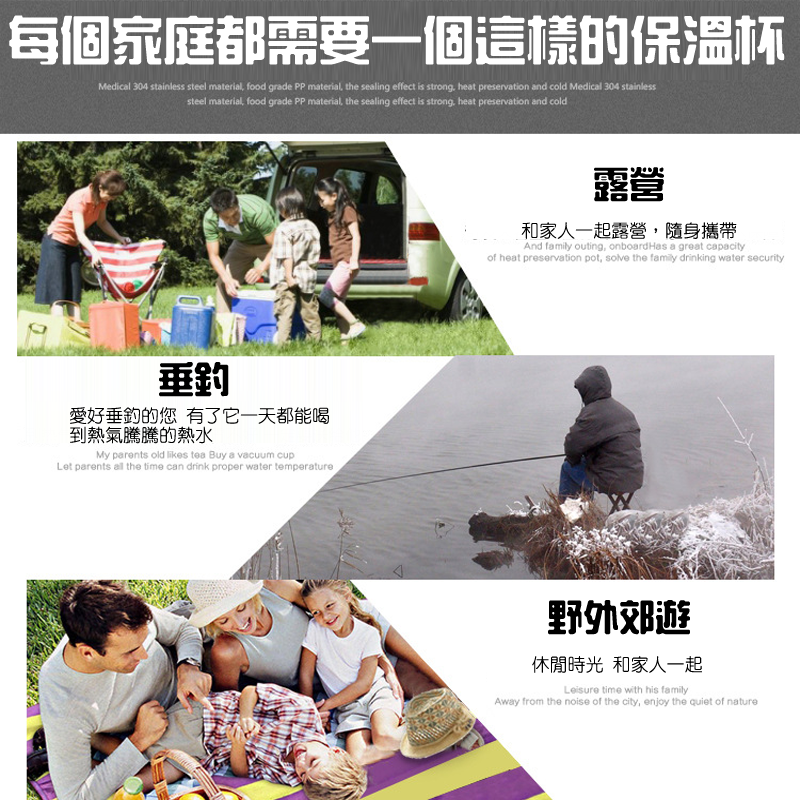
<style>
.page{position:relative;width:800px;height:800px;background:#ffffff}
.page>*{position:absolute;margin:0}
.t1{font:51.9px "HanWangZonYi";color:#ffffff}
.t2{font:36px "HanWangZonYi";color:#000000}
.t3{font:18px "HanWangYenLight";color:#000000}
</style>
<div class="page">
<p class="t1" style="left:9px;top:15px;width:776px;height:50px">每個家庭都需要一個這樣的保溫杯</p>
<p class="t2" style="left:594px;top:167px;width:70px;height:35px">露營</p>
<p class="t3" style="left:521px;top:222px;width:216px;height:17px">和家人一起露營，隨身攜帶</p>
<p class="t2" style="left:159px;top:362px;width:70px;height:35px">垂釣</p>
<p class="t3" style="left:70px;top:407px;width:259px;height:37px">愛好垂釣的您 有了它一天都能喝<br>到熱氣騰騰的熱水</p>
<p class="t2" style="left:548px;top:600px;width:142px;height:35px">野外郊遊</p>
<p class="t3" style="left:532px;top:656px;width:170px;height:17px">休閒時光 和家人一起</p>
</div>
